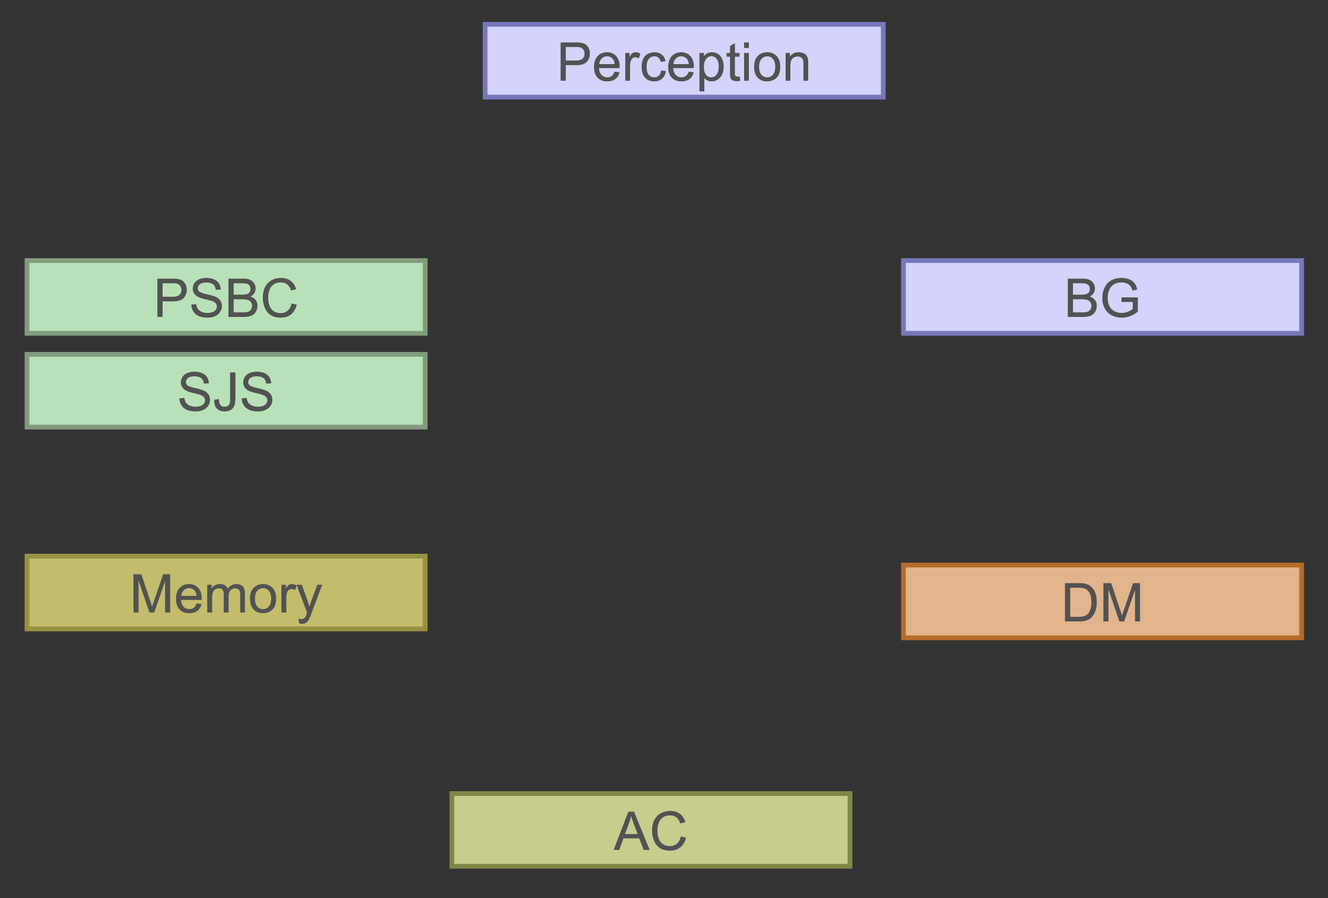
<style>
.page{position:relative;width:1328px;height:898px;background:#333333}
.page>*{position:absolute;margin:0}
.t1{font:53.4px "ArialMT";color:#525252}
</style>
<div class="page">
<p class="t1" style="left:560px;top:42px;width:248px;height:49px">Perception</p>
<p class="t1" style="left:157px;top:278px;width:140px;height:40px">PSBC</p>
<p class="t1" style="left:1068px;top:278px;width:70px;height:40px">BG</p>
<p class="t1" style="left:179px;top:371px;width:93px;height:41px">SJS</p>
<p class="t1" style="left:134px;top:574px;width:188px;height:50px">Memory</p>
<p class="t1" style="left:1065px;top:583px;width:76px;height:38px">DM</p>
<p class="t1" style="left:614px;top:811px;width:72px;height:40px">AC</p>
</div>
